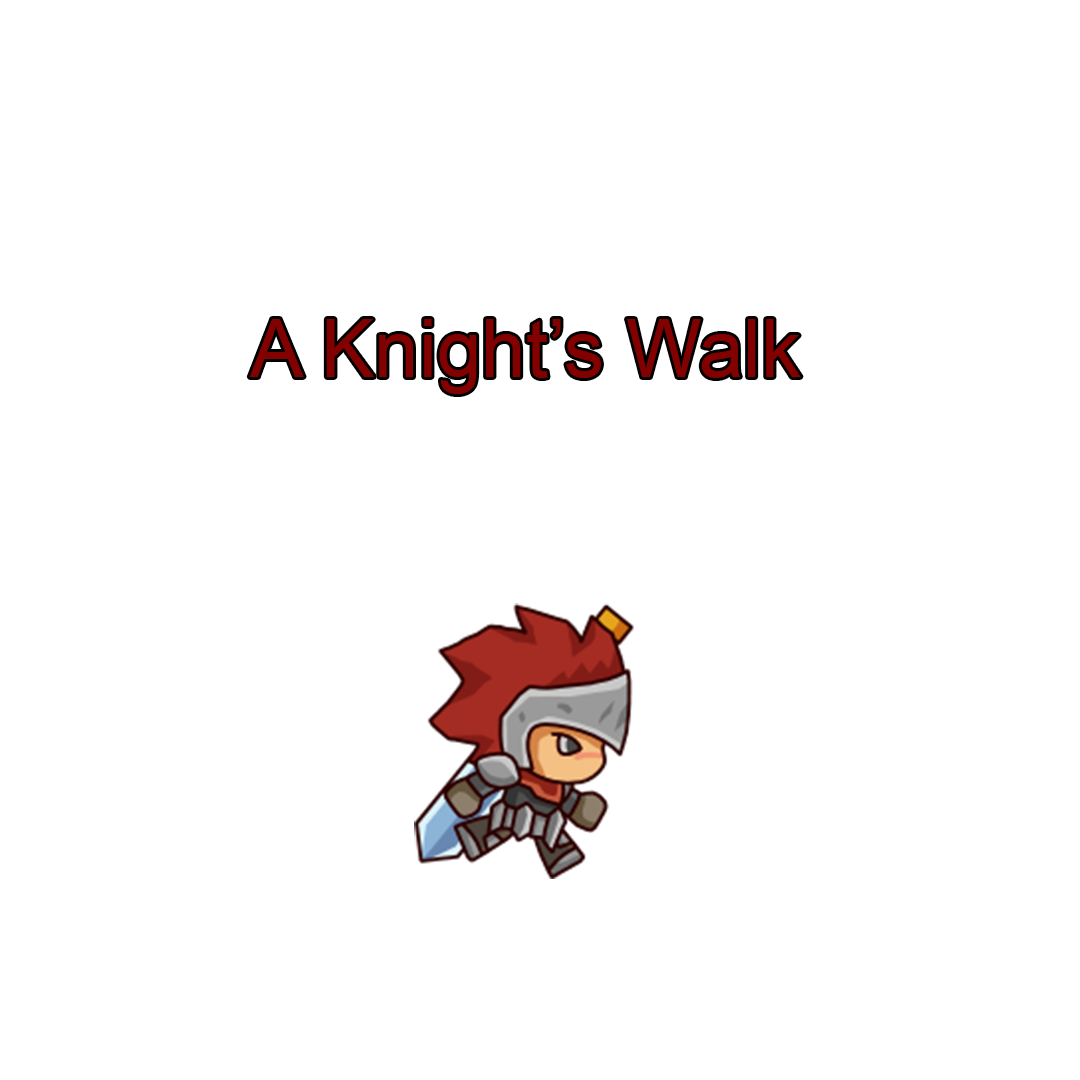
<style>
.page{position:relative;width:1080px;height:1080px;background:#ffffff}
.page>*{position:absolute;margin:0}
.t1{font:80px "ArialMT";color:#830000}
</style>
<div class="page">
<p class="t1" style="left:249px;top:319px;width:552px;height:75px">A Knight’s Walk</p>
</div>
